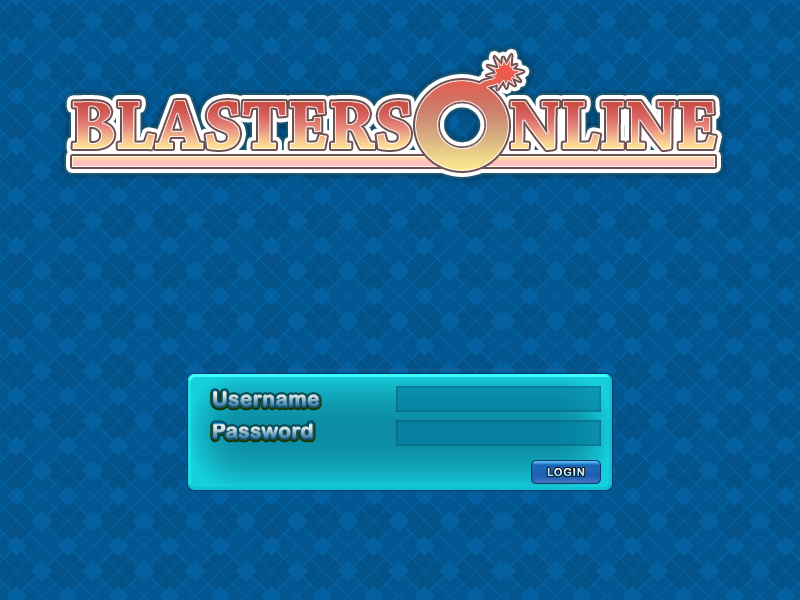
<style>
.page{position:relative;width:800px;height:600px}
.page>*{position:absolute;margin:0}
.t1{font:20.5px "ArialRoundedMTBold";font-weight:bold}
.t2{font:11px "ArialRoundedMTBold";letter-spacing:0.06em}
</style>
<div class="page">
<p class="t1" style="left:213px;top:390px;width:106px;height:17px">Username</p>
<p class="t1" style="left:213px;top:422px;width:100px;height:17px">Password</p>
<p class="t2" style="left:547px;top:467px;width:38px;height:10px">LOGIN</p>
</div>
